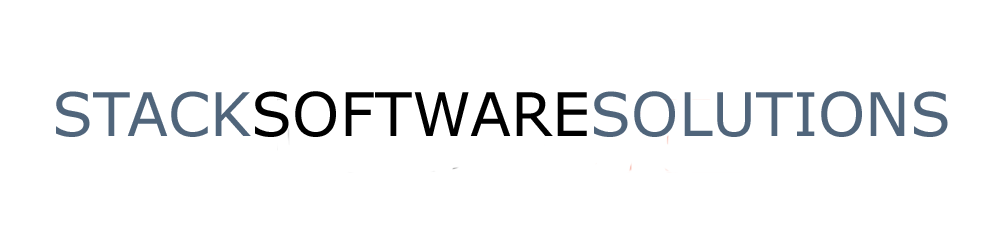
<style>
.page{position:relative;width:1008px;height:230px;background:#ffffff}
.page>*{position:absolute;margin:0}
.t1{font:60px "MSReferenceSansSerif";color:#50657b}
.t2{font:60px "MSReferenceSansSerif";color:#000000}
</style>
<div class="page">
<p class="t1" style="left:56px;top:91px;width:892px;height:46px">STACK<span class="t2">SOFTWARE</span>SOLUTIONS</p>
</div>
